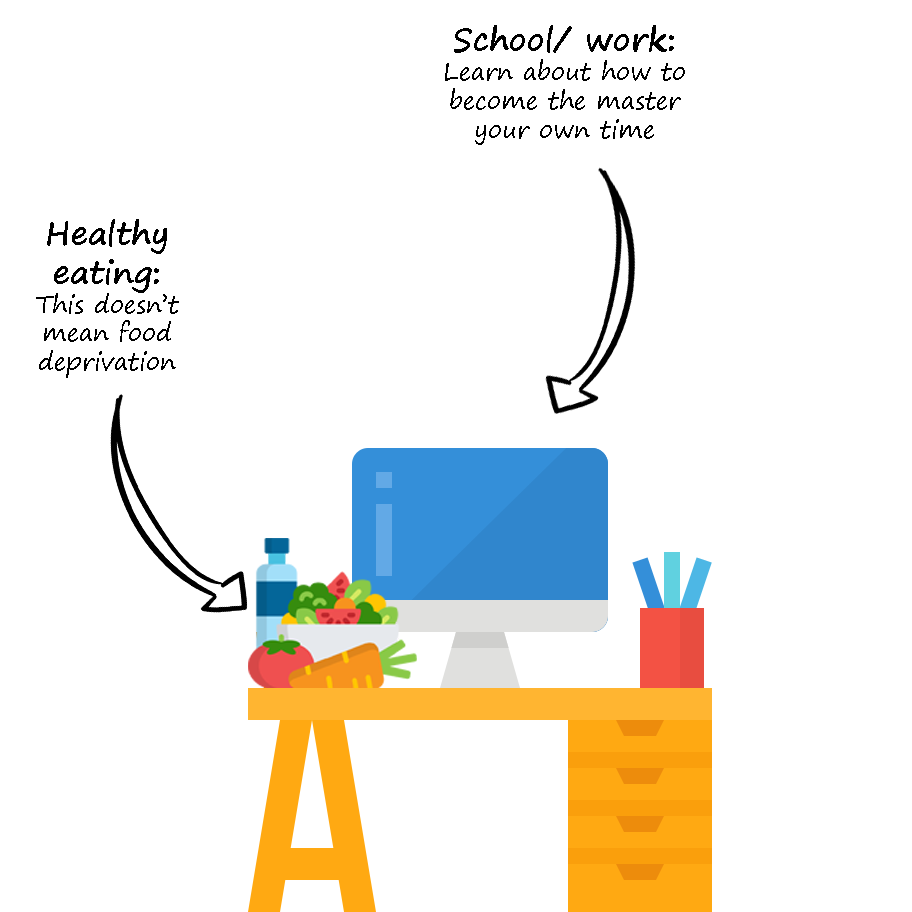
<style>
.page{position:relative;width:912px;height:912px;background:#ffffff}
.page>*{position:absolute;margin:0}
.t1{font:24px "SegoePrint";color:#000000}
.t2{font:32px "SegoePrint-Bold";color:#000000}
</style>
<div class="page">
<p class="t1" style="left:445px;top:25px;width:240px;height:120px;text-align:center"><span class="t2">School/ work:<br></span>Learn about how to become the master your own time</p>
<p class="t1" style="left:36px;top:219px;width:143px;height:159px;text-align:center"><span class="t2">Healthy eating:<br></span>This doesn’t mean food deprivation</p>
</div>
